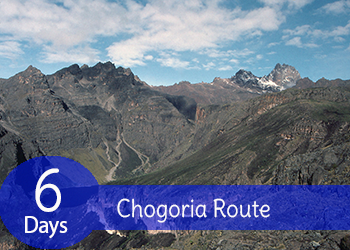
<style>
.page{position:relative;width:350px;height:250px}
.page>*{position:absolute;margin:0}
.t1{font:60px "Delius-Regular";color:#fcfafa;scale:0.92 1}
.t2{font:24px "Delius-Regular";color:#fcfafa;scale:0.92 1}
.t3{font:24px "MyriadHebrew-Regular";color:#fcfafa;scale:0.92 1}
</style>
<div class="page">
<p class="t1" style="left:35px;top:168px;width:26px;height:44px">6</p>
<p class="t2" style="left:117px;top:198px;width:153px;height:25px">Chogoria Route</p>
<p class="t3" style="left:25px;top:216px;width:43px;height:23px">Days</p>
</div>
